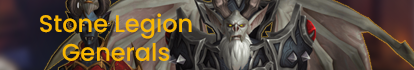
<style>
.page{position:relative;width:414px;height:70px}
.page>*{position:absolute;margin:0}
.t1{font:24px "Poppins-Medium";color:#f8b700}
</style>
<div class="page">
<p class="t1" style="left:40px;top:13px;width:152px;height:48px;text-align:center">Stone Legion<br>Generals</p>
</div>
